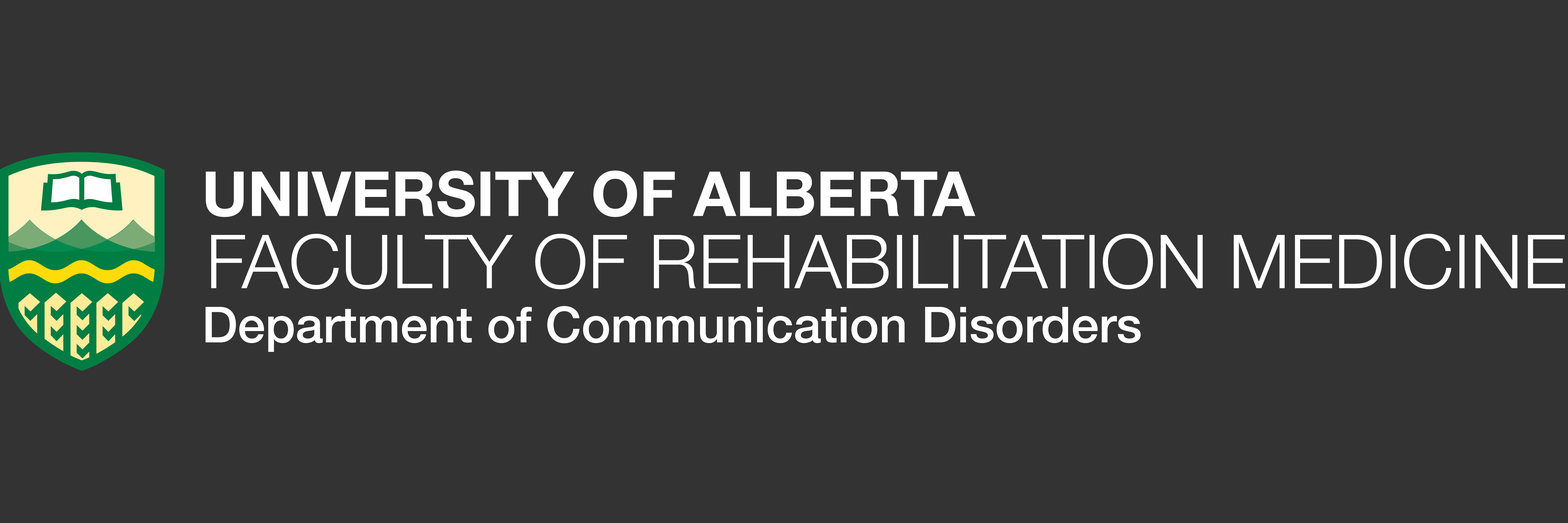
<style>
.page{position:relative;width:1568px;height:523px;background:#333333}
.page>*{position:absolute;margin:0}
.t1{font:62px "HelveticaNeue-Bold";color:#ffffff}
.t2{font:74.4px "HelveticaNeue-Light";color:#ffffff}
.t3{font:49.6px "HelveticaNeue-Medium";color:#ffffff}
</style>
<div class="page">
<p class="t1" style="left:206px;top:170px;width:769px;height:47px">UNIVERSITY OF ALBERTA</p>
<p class="t2" style="left:211px;top:233px;width:1354px;height:56px">FACULTY OF REHABILITATION MEDICINE</p>
<p class="t3" style="left:205px;top:306px;width:936px;height:46px">Department of Communication Disorders</p>
</div>
